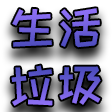
<style>
.page{position:relative;width:112px;height:112px}
.page>*{position:absolute;margin:0}
.t1{font:48px "HappyZcool-2016"}
</style>
<div class="page">
<p class="t1" style="left:11px;top:8px;width:90px;height:98px;text-align:center">生活<br>垃圾</p>
</div>
